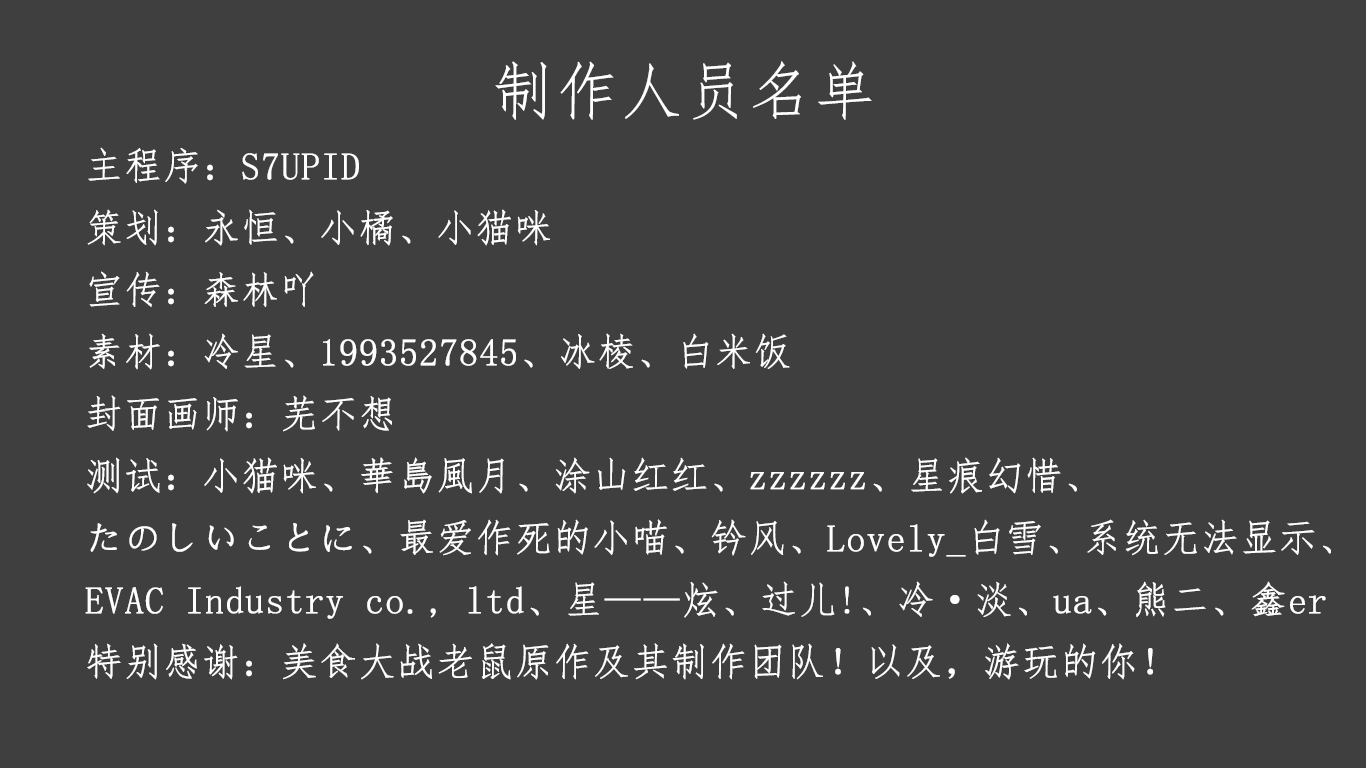
<style>
.page{position:relative;width:1366px;height:768px;background:#3f3f3f}
.page>*{position:absolute;margin:0}
.t1{font:62.7px "FangSong";color:#ffffff;font-weight:bold}
.t2{font:38px/62px "FangSong";color:#ffffff;font-weight:bold}
</style>
<div class="page">
<p class="t1" style="left:495px;top:61px;width:377px;height:59px">制作人员名单</p>
<p class="t2" style="left:85px;top:147px;width:1246px;height:533px">主程序：S7UPID<br>策划：永恒、小橘、小猫咪<br>宣传：森林吖<br>素材：冷星、1993527845、冰棱、白米饭<br>封面画师：芜不想<br>测试：小猫咪、華島風月、涂山红红、zzzzzz、星痕幻惜、<br>たのしいことに、最爱作死的小喵、钤风、Lovely_白雪、系统无法显示、<br>EVAC Industry co., ltd、星——炫、过儿!、冷·淡、ua、熊二、鑫er<br>特别感谢：美食大战老鼠原作及其制作团队！以及，游玩的你！</p>
</div>
